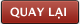
<style>
.page{position:relative;width:80px;height:24px}
.page>*{position:absolute;margin:0}
.t1{font:11.5px "LucidaGrande-Bold";color:#ffffff}
</style>
<div class="page">
<p class="t1" style="left:10px;top:7px;width:56px;height:12px">QUAY LẠI</p>
</div>
